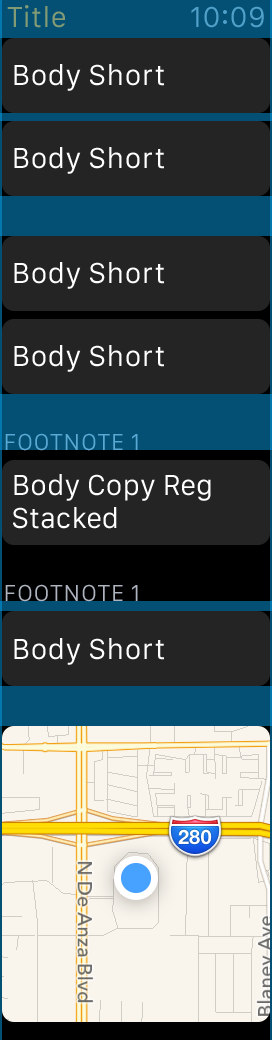
<style>
.page{position:relative;width:272px;height:1040px;background:#242424}
.page>*{position:absolute;margin:0}
.t1{font:30px "SanFranciscoText-Regular";color:#ffffff}
.t2{font:24px "SanFranciscoText-Regular";letter-spacing:0.02em;color:#59a9d4}
.t3{font:30px/33px "SanFranciscoText-Regular";letter-spacing:-0.01em;color:#ffffff}
.t4{font:24px "SanFranciscoText-Regular";letter-spacing:0.02em;color:#adb3bf}
</style>
<div class="page">
<p class="t1" style="left:14px;top:64px;width:150px;height:27px">Body Short</p>
<p class="t1" style="left:14px;top:147px;width:150px;height:27px">Body Short</p>
<p class="t1" style="left:14px;top:262px;width:150px;height:27px">Body Short</p>
<p class="t1" style="left:14px;top:345px;width:150px;height:27px">Body Short</p>
<p class="t2" style="left:5px;top:433px;width:133px;height:18px">FOOTNOTE 1</p>
<p class="t3" style="left:13px;top:474px;width:198px;height:55px">Body Copy Reg<br>Stacked</p>
<p class="t4" style="left:5px;top:584px;width:133px;height:18px">FOOTNOTE 1</p>
<p class="t1" style="left:14px;top:638px;width:150px;height:27px">Body Short</p>
</div>
